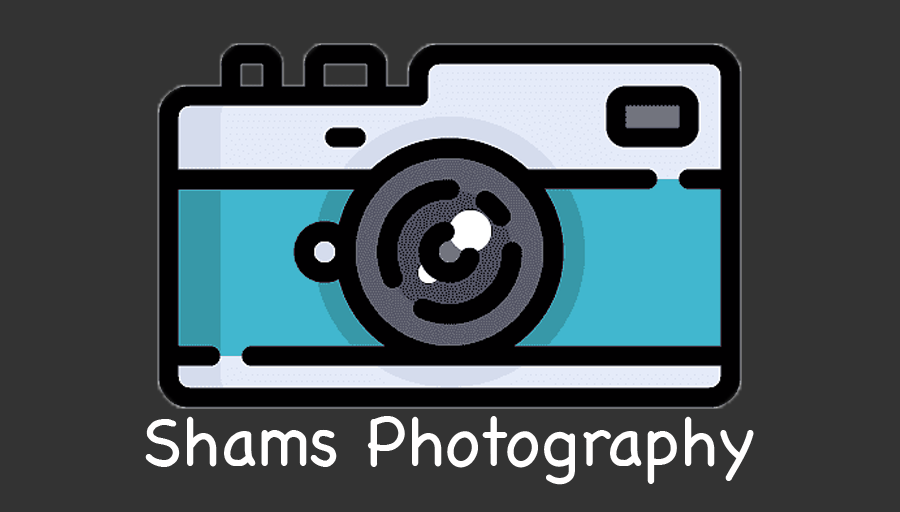
<style>
.page{position:relative;width:900px;height:512px;background:#333333}
.page>*{position:absolute;margin:0}
.t1{font:70px "Chalkboard";color:#fffefe}
</style>
<div class="page">
<p class="t1" style="left:145px;top:416px;width:609px;height:69px">Shams Photography</p>
</div>
